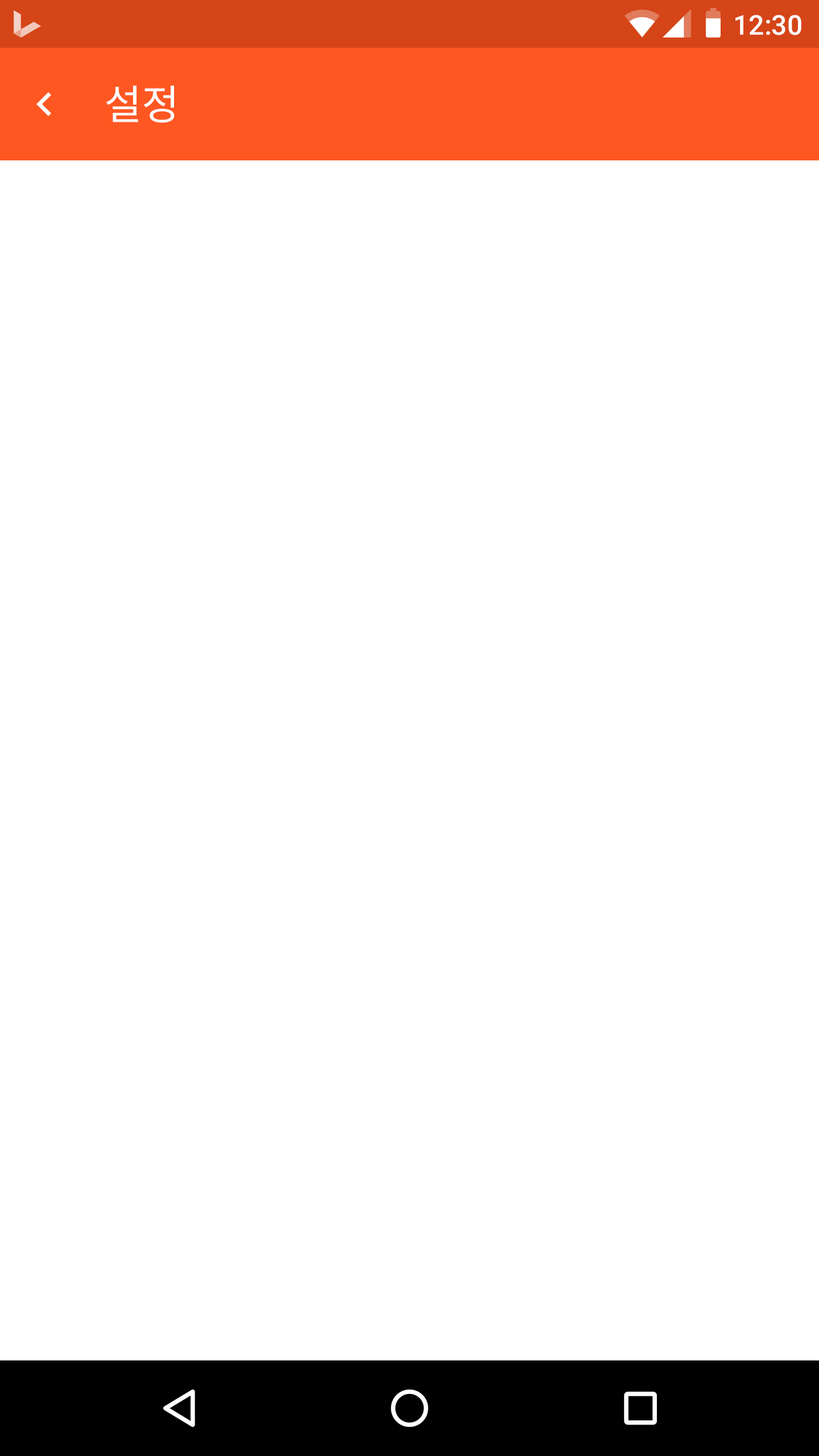
<style>
.page{position:relative;width:819px;height:1456px;background:#ffffff}
.page>*{position:absolute;margin:0}
.t1{font:27.3px "Roboto-Medium";color:#ffffff}
.t2{font:40.9px "NotoSansCJKkr-Regular";color:#ffffff}
</style>
<div class="page">
<p class="t1" style="left:735px;top:15px;width:66px;height:20px">12:30</p>
<p class="t2" style="left:106px;top:85px;width:69px;height:38px">설정</p>
</div>
